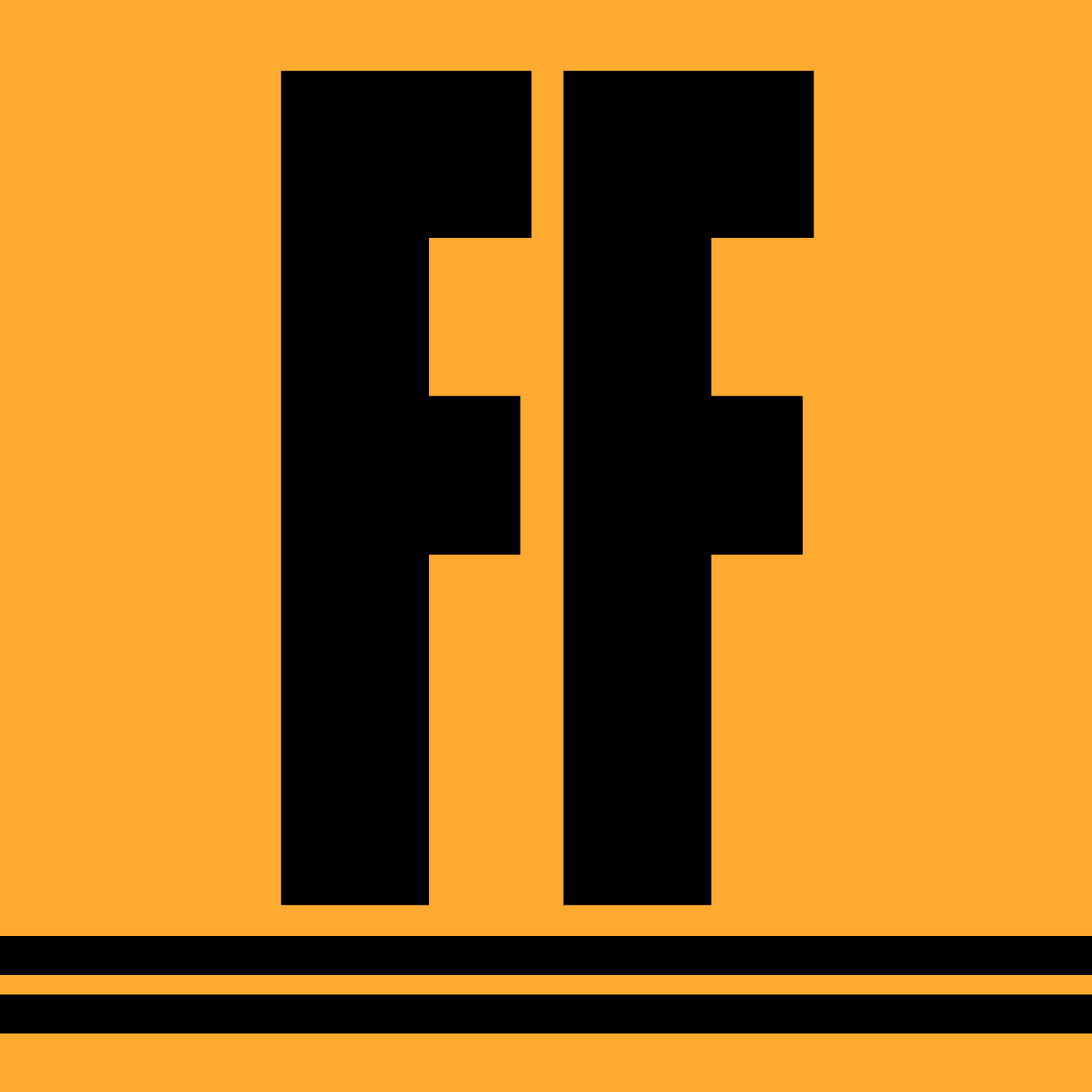
<style>
.page{position:relative;width:1092px;height:1092px;background:#ffaa30}
.page>*{position:absolute;margin:0}
.t1{font:1055.3px "Impact";color:#000000;text-transform:uppercase;scale:0.68 1}
</style>
<div class="page">
<p class="t1" style="left:281px;top:70px;width:533px;height:836px">FF</p>
</div>
